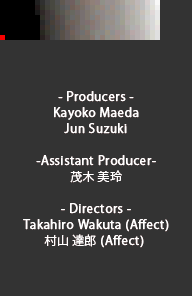
<style>
.page{position:relative;width:192px;height:296px;background:#333333}
.page>*{position:absolute;margin:0}
.t1{font:12px/16px "KozGoPr6N-Regular";letter-spacing:0.025em;color:#ffffff;font-weight:bold}
.t2{font:12px/16px "KozGoPr6N-Regular";letter-spacing:0.025em;color:#ffffff}
</style>
<div class="page">
<p class="t1" style="left:23px;top:91px;width:146px;height:157px;text-align:center">- Producers -<br>Kayoko Maeda<br>Jun Suzuki<br><br>-Assistant Producer-<br><span class="t2">茂木 美玲<br></span><br>- Directors -<br>Takahiro Wakuta (Affect)<br><span class="t2">村山 達郎</span> (Affect)</p>
</div>
